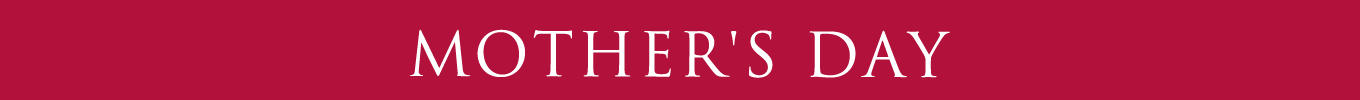
<style>
.page{position:relative;width:1360px;height:100px;background:#b1113a}
.page>*{position:absolute;margin:0}
.t1{font:60px "TrajanPro-Regular";letter-spacing:0.06em;color:#ffffff}
</style>
<div class="page">
<p class="t1" style="left:410px;top:29px;width:540px;height:49px">MOTHER'S DAY</p>
</div>
